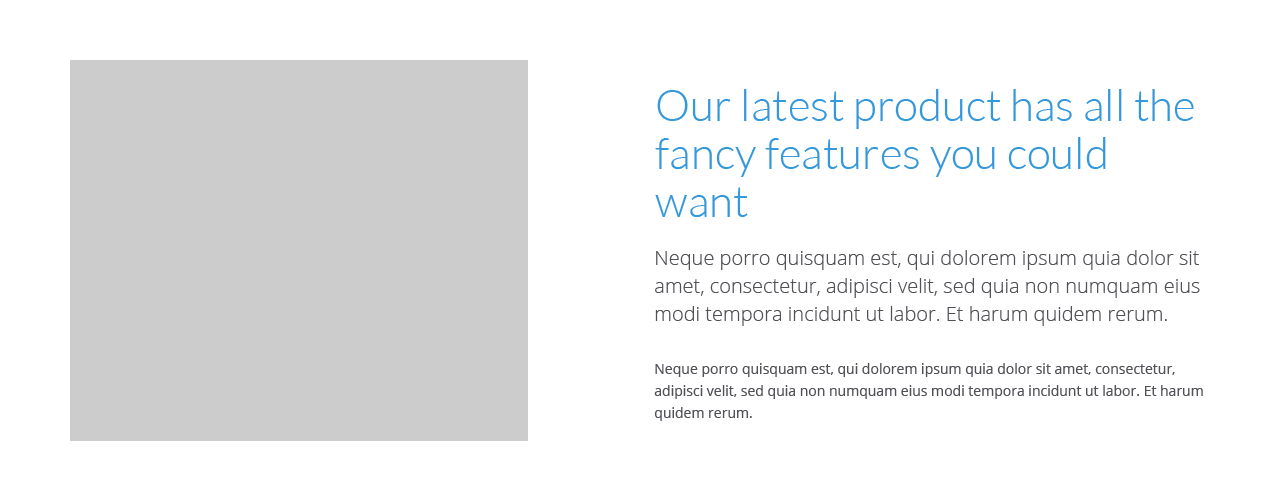
<style>
.page{position:relative;width:1280px;height:501px;background:#ffffff}
.page>*{position:absolute;margin:0}
.t1{font:44px/48px "Lato-Light";color:#3498db}
.t2{font:20px/28px "OpenSans-Light";color:#515157}
.t3{font:14px/22px "OpenSans";color:#515157}
</style>
<div class="page">
<p class="t1" style="left:655px;top:89px;width:539px;height:128px">Our latest product has all the fancy features you could want</p>
<p class="t2" style="left:655px;top:250px;width:545px;height:76px">Neque porro quisquam est, qui dolorem ipsum quia dolor sit amet, consectetur, adipisci velit, sed quia non numquam eius modi tempora incidunt ut labor. Et harum quidem rerum.</p>
<p class="t3" style="left:654px;top:363px;width:549px;height:58px">Neque porro quisquam est, qui dolorem ipsum quia dolor sit amet, consectetur, adipisci velit, sed quia non numquam eius modi tempora incidunt ut labor. Et harum quidem rerum.</p>
</div>
